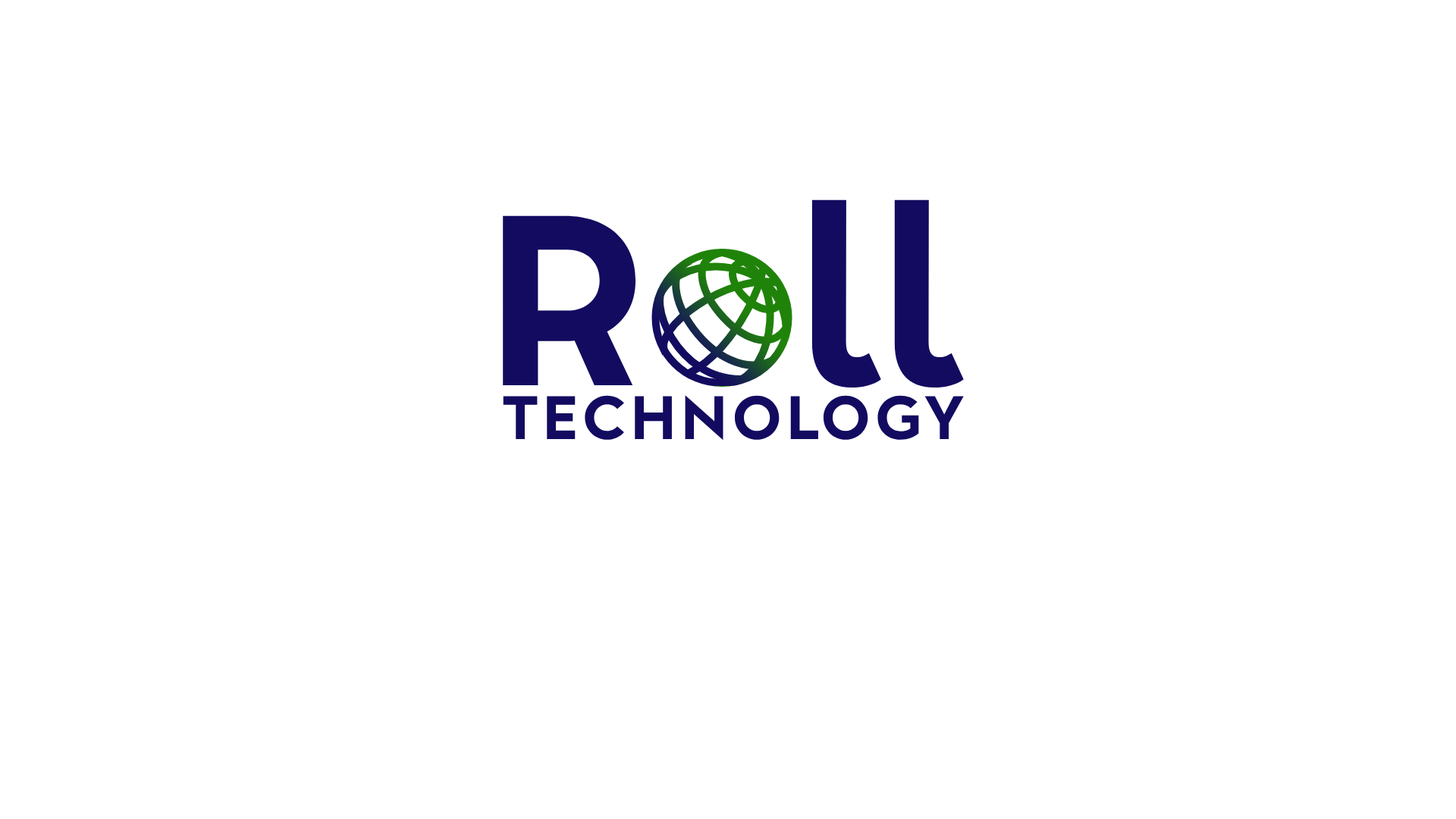
<style>
.page{position:relative;width:1456px;height:819px;background:#ffffff}
.page>*{position:absolute;margin:0}
.t1{font:227.5px "AlbulaPro-Bold";color:#130b60}
.t2{font:57.6px "AlbulaPro-Bold";letter-spacing:0.086em;color:#130b60}
</style>
<div class="page">
<p class="t1" style="left:503px;top:199px;width:461px;height:189px">R  ll</p>
<p class="t2" style="left:503px;top:395px;width:461px;height:46px">TECHNOLOGY</p>
</div>
